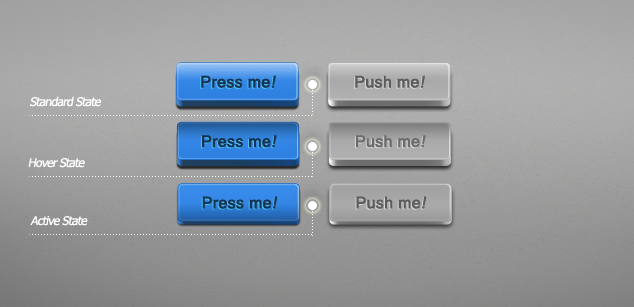
<style>
.page{position:relative;width:634px;height:307px}
.page>*{position:absolute;margin:0}
.t1{font:15.9px "MicrosoftSansSerif";color:#143452;font-weight:bold}
.t2{font:15.9px "MicrosoftSansSerif";color:#143452;font-weight:bold;font-style:italic}
.t3{font:15.9px "MicrosoftSansSerif";color:#5c5c5c;font-weight:bold}
.t4{font:15.9px "MicrosoftSansSerif";color:#5c5c5c;font-weight:bold;font-style:italic}
.t5{font:12px "Tahoma";letter-spacing:-0.05em;color:#ffffff;font-style:italic}
.t6{font:15.9px "MicrosoftSansSerif";color:#6b6b6b;font-weight:bold}
.t7{font:15.9px "MicrosoftSansSerif";color:#6b6b6b;font-weight:bold;font-style:italic}
</style>
<div class="page">
<p class="t1" style="left:201px;top:75px;width:75px;height:13px">Press me<span class="t2">!</span></p>
<p class="t3" style="left:355px;top:75px;width:70px;height:13px">Push me<span class="t4">!</span></p>
<p class="t5" style="left:30px;top:96px;width:71px;height:11px">Standard State</p>
<p class="t1" style="left:202px;top:135px;width:75px;height:13px">Press me<span class="t2">!</span></p>
<p class="t6" style="left:356px;top:135px;width:70px;height:13px">Push me<span class="t7">!</span></p>
<p class="t5" style="left:28px;top:158px;width:57px;height:10px">Hover State</p>
<p class="t1" style="left:202px;top:196px;width:76px;height:13px">Press me<span class="t2">!</span></p>
<p class="t3" style="left:356px;top:196px;width:71px;height:13px">Push me<span class="t4">!</span></p>
<p class="t5" style="left:30px;top:216px;width:58px;height:10px">Active State</p>
</div>
